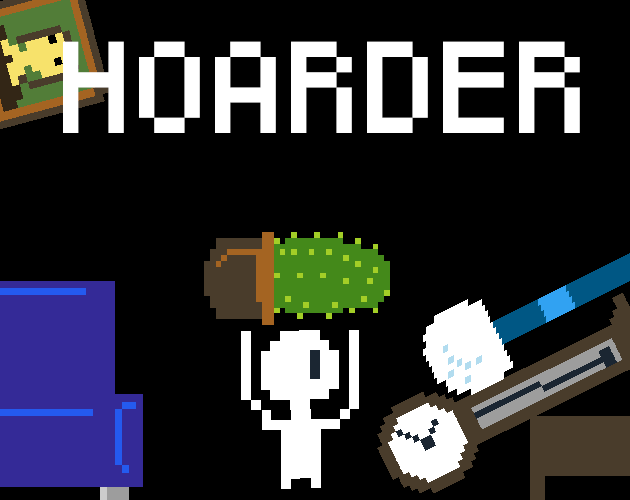
<style>
.page{position:relative;width:630px;height:500px;background:#000000}
.page>*{position:absolute;margin:0}
.t1{font:76px "Pixeled";color:#ffffff}
</style>
<div class="page">
<p class="t1" style="left:63px;top:41px;width:517px;height:92px">HOARDER</p>
</div>
